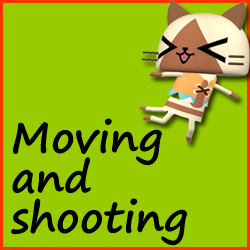
<style>
.page{position:relative;width:250px;height:250px;background:#99cc00}
.page>*{position:absolute;margin:0}
.t1{font:42.6px/40px "SegoePrint-Bold";color:#000000}
</style>
<div class="page">
<p class="t1" style="left:11px;top:118px;width:177px;height:128px">Moving <br>and <br>shooting</p>
</div>
